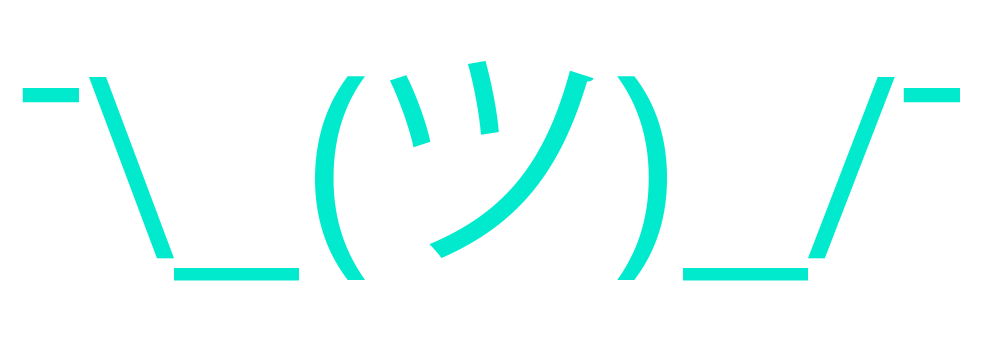
<style>
.page{position:relative;width:984px;height:340px;background:#ffffff}
.page>*{position:absolute;margin:0}
.t1{font:250px "MyriadPro-Regular";color:#02eacd}
.t2{font:250px "KozGoPr6N-Regular";color:#02eacd}
</style>
<div class="page">
<p class="t1" style="left:22px;top:61px;width:938px;height:220px">¯\_(<span class="t2">ツ</span>)_/¯</p>
</div>
